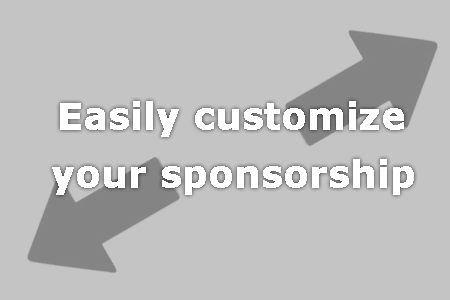
<style>
.page{position:relative;width:450px;height:300px;background:#c4c4c4}
.page>*{position:absolute;margin:0}
.t1{font:36px "Verdana-Bold";color:#ffffff;font-weight:bold}
</style>
<div class="page">
<p class="t1" style="left:60px;top:101px;width:344px;height:36px">Easily customize</p>
<p class="t1" style="left:52px;top:159px;width:362px;height:36px">your sponsorship</p>
</div>
